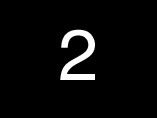
<style>
.page{position:relative;width:157px;height:118px;background:#000000}
.page>*{position:absolute;margin:0}
.t1{font:72px "Helvetica";color:#ffffff}
</style>
<div class="page">
<p class="t1" style="left:60px;top:29px;width:35px;height:51px">2</p>
</div>
